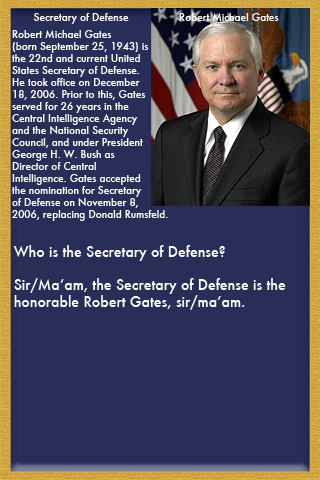
<style>
.page{position:relative;width:320px;height:480px;background:#292e59}
.page>*{position:absolute;margin:0}
.t1{font:10px "Futura-Medium";color:#ffffff}
.t2{font:14px "Futura-Medium";color:#ffffff}
</style>
<div class="page">
<p class="t1" style="left:33px;top:13px;width:96px;height:11px">Secretary of Defense</p>
<p class="t1" style="left:179px;top:13px;width:100px;height:8px">Robert Michael Gates</p>
<p class="t1" style="left:12px;top:30px;width:156px;height:191px">Robert Michael Gates <br>(born September 25, 1943) is <br>the 22nd and current United <br>States Secretary of Defense. <br>He took office on December <br>18, 2006. Prior to this, Gates <br>served for 26 years in the <br>Central Intelligence Agency <br>and the National Security <br>Council, and under President <br>George H. W. Bush as <br>Director of Central <br>Intelligence. Gates accepted <br>the nomination for Secretary <br>of Defense on November 8, <br>2006, replacing Donald Rumsfeld.</p>
<p class="t2" style="left:13px;top:245px;width:273px;height:65px">Who is the Secretary of Defense?<br><br>Sir/Ma’am, the Secretary of Defense is the <br>honorable Robert Gates, sir/ma’am.</p>
</div>
